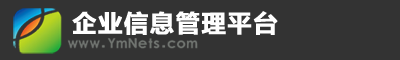
<style>
.page{position:relative;width:400px;height:60px;background:#333333}
.page>*{position:absolute;margin:0}
.t1{font:24px "MicrosoftYaHei-Bold";letter-spacing:0.05em;color:#ffffff;font-weight:bold}
</style>
<div class="page">
<p class="t1" style="left:72px;top:11px;width:206px;height:24px">企业信息管理平台</p>
</div>
